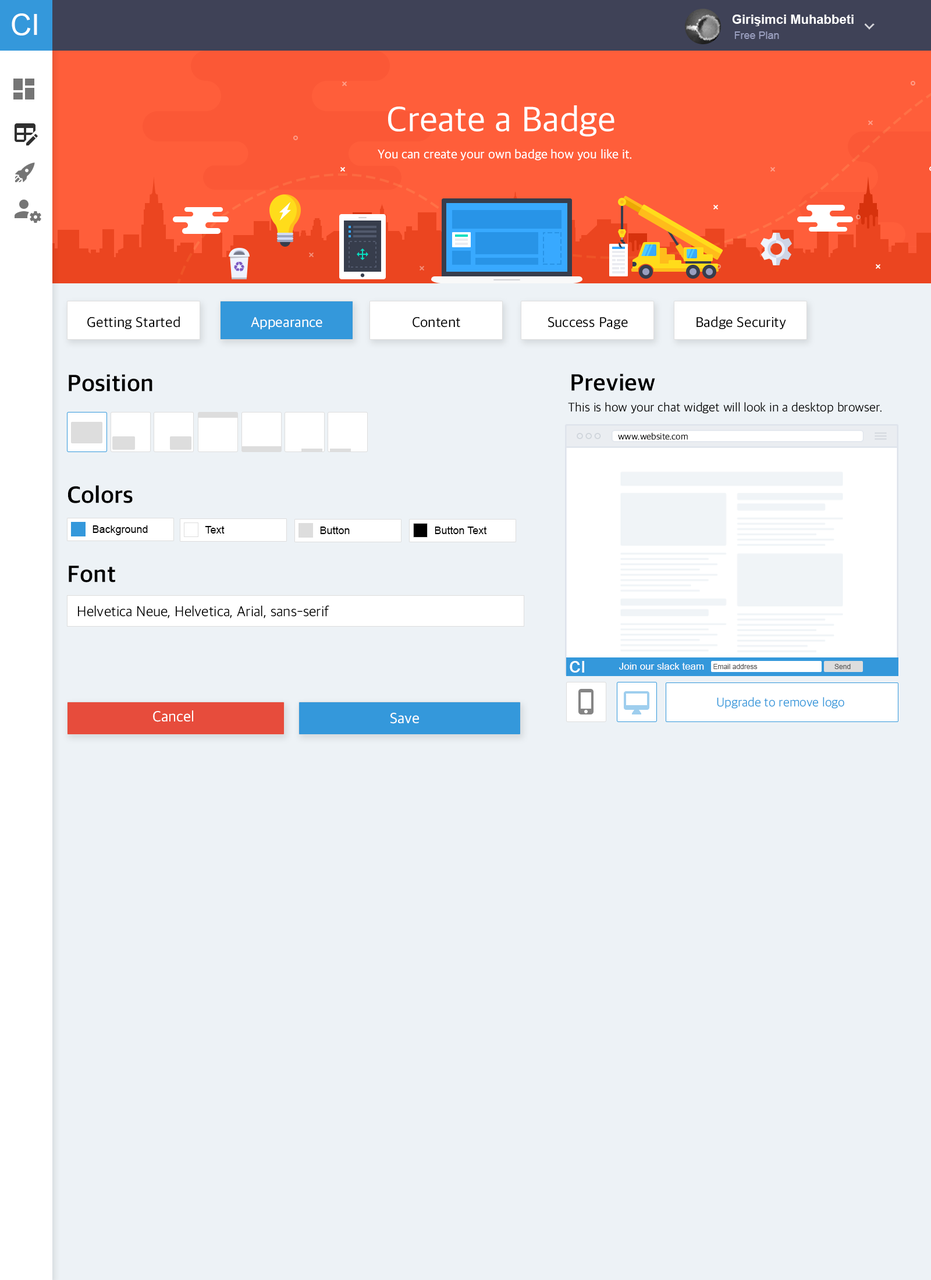
<style>
.page{position:relative;width:931px;height:1280px;background:#edf2f6}
.page>*{position:absolute;margin:0}
.t1{font:29.1px "ArialMT";color:#ffffff}
.t2{font:12.8px "Arial-BoldMT";color:#ffffff}
.t3{font:10.5px "ArialMT";color:#9a9fbf}
.t4{font:36.1px "AppleSDGothicNeo-Regular";color:#ffffff}
.t5{font:12.8px "AppleSDGothicNeo-Regular";color:#ffffff}
.t6{font:14.6px "AppleSDGothicNeo-Regular";color:#000000}
.t7{font:14.6px "AppleSDGothicNeo-Regular";color:#ffffff}
.t8{font:23.9px "AppleSDGothicNeo-Bold";color:#000000}
.t9{font:12.8px "AppleSDGothicNeo-Light";color:#000000}
.t10{font:9.3px "AppleSDGothicNeo-Light";color:#000000}
.t11{font:10.5px "ArialMT";color:#000000}
.t12{font:14.6px "AppleSDGothicNeo-Light";color:#000000}
.t13{font:22.1px "ArialMT";color:#ffffff}
.t14{font:9.9px "ArialMT";color:#ffffff}
.t15{font:7px "ArialMT";color:#585858}
.t16{font:12.8px "AppleSDGothicNeo-Light";color:#3498db}
.t17{font:15.1px "AppleSDGothicNeo-Regular";color:#ffffff}
</style>
<div class="page">
<p class="t1" style="left:12px;top:13px;width:25px;height:23px">CI</p>
<p class="t2" style="left:732px;top:15px;width:122px;height:11px">Girişimci Muhabbeti</p>
<p class="t3" style="left:735px;top:31px;width:44px;height:8px">Free Plan</p>
<p class="t4" style="left:388px;top:105px;width:227px;height:32px">Create a Badge</p>
<p class="t5" style="left:378px;top:149px;width:254px;height:12px">You can create your own badge how you like it.</p>
<p class="t6" style="left:87px;top:317px;width:93px;height:12px">Getting Started</p>
<p class="t7" style="left:251px;top:317px;width:71px;height:12px">Appearance</p>
<p class="t6" style="left:413px;top:317px;width:47px;height:11px">Content</p>
<p class="t6" style="left:548px;top:317px;width:80px;height:12px">Success Page</p>
<p class="t6" style="left:697px;top:317px;width:89px;height:12px">Badge Security</p>
<p class="t8" style="left:69px;top:374px;width:83px;height:18px">Position</p>
<p class="t8" style="left:572px;top:374px;width:83px;height:17px">Preview</p>
<p class="t9" style="left:568px;top:402px;width:314px;height:12px">This is how your chat widget will look in a desktop browser.</p>
<p class="t10" style="left:618px;top:432px;width:70px;height:8px">www.website.com</p>
<p class="t8" style="left:68px;top:485px;width:65px;height:18px">Colors</p>
<p class="t11" style="left:93px;top:526px;width:55px;height:9px">Background</p>
<p class="t11" style="left:205px;top:526px;width:20px;height:8px">Text</p>
<p class="t11" style="left:320px;top:527px;width:30px;height:7px">Button</p>
<p class="t11" style="left:435px;top:527px;width:52px;height:7px">Button Text</p>
<p class="t8" style="left:69px;top:566px;width:46px;height:17px">Font</p>
<p class="t12" style="left:78px;top:605px;width:251px;height:14px">Helvetica Neue, Helvetica, Arial, sans-serif</p>
<p class="t13" style="left:570px;top:661px;width:14px;height:12px">cı</p>
<p class="t14" style="left:619px;top:663px;width:85px;height:7px">Join our slack team</p>
<p class="t15" style="left:714px;top:664px;width:44px;height:5px">Email address</p>
<p class="t15" style="left:835px;top:664px;width:16px;height:5px">Send</p>
<p class="t16" style="left:717px;top:697px;width:128px;height:12px">Upgrade to remove logo</p>
<p class="t17" style="left:153px;top:711px;width:40px;height:11px">Cancel</p>
<p class="t17" style="left:391px;top:713px;width:28px;height:11px">Save</p>
</div>
